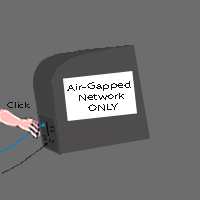
<style>
.page{position:relative;width:200px;height:200px;background:#6d6d6d}
.page>*{position:absolute;margin:0}
.t1{font:9px "MyriadPro-Regular";color:#101010;scale:1.5 1}
.t2{font:8px "MyriadPro-Regular";color:#101010;scale:1.5 1}
</style>
<div class="page">
<p class="t1" style="left:67px;top:81px;width:64px;height:30px;text-align:center;rotate:-3deg">Air-Gapped<br>Network<br>ONLY</p>
<p class="t2" style="left:7px;top:102px;width:23px;height:6px">Click</p>
</div>
